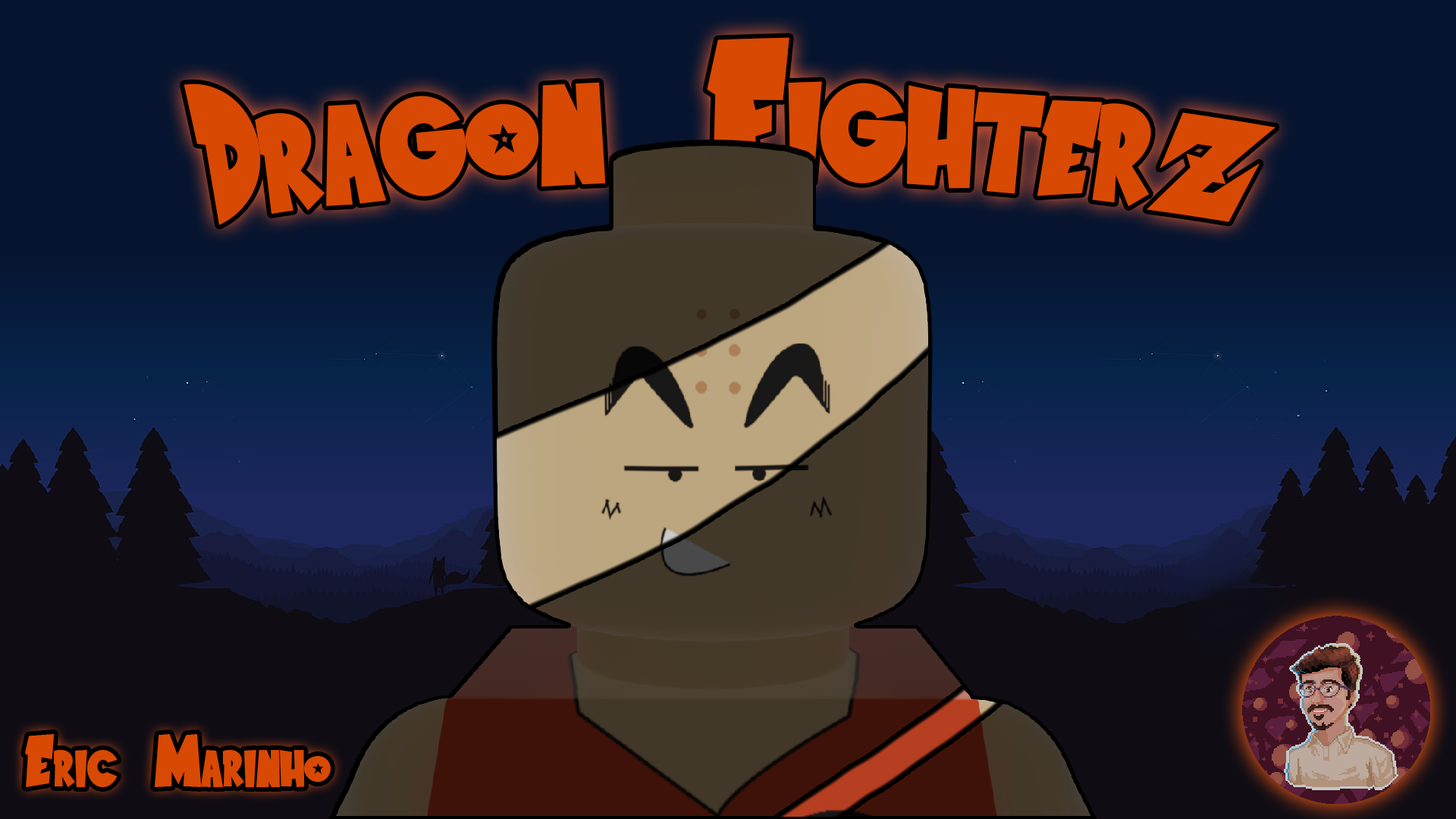
<style>
.page{position:relative;width:1456px;height:819px}
.page>*{position:absolute;margin:0}
.t1{font:204.7px "SaiyanSans";color:#d84903;font-variant:small-caps}
.t2{font:75.8px "SaiyanSans";color:#d84903;font-variant:small-caps}
</style>
<div class="page">
<p class="t1" style="left:184px;top:37px;width:1091px;height:188px">Dragon Fighterz</p>
<p class="t2" style="left:25px;top:734px;width:306px;height:53px">Eric Marinho</p>
</div>
